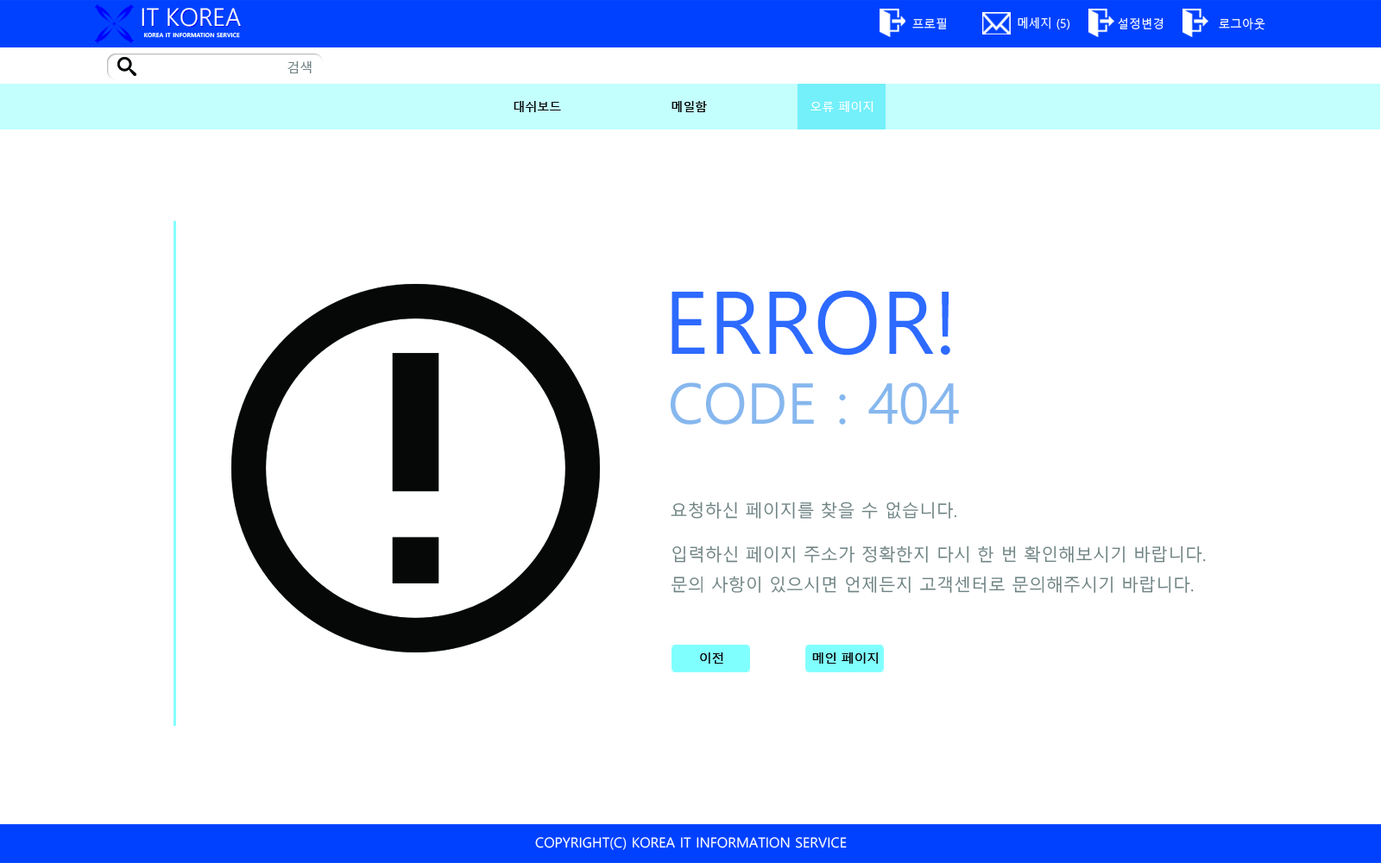
<style>
.page{position:relative;width:1381px;height:863px;background:#ffffff}
.page>*{position:absolute;margin:0}
.t1{font:12.1px "MalgunGothic";color:#ffffff}
.t2{font:12.9px "MalgunGothic";color:#6e8282}
.t3{font:12.1px "MalgunGothic";color:#060808}
.t4{font:86.3px "MalgunGothic";color:#2d6aff}
.t5{font:56.1px "MalgunGothic";color:#86b7ee}
.t6{font:17.3px "MalgunGothic";color:#708484}
.t7{font:12.5px "MalgunGothic";color:#060808}
.t8{font:13.8px "MalgunGothic";color:#ffffff}
</style>
<div class="page">
<p class="t1" style="left:912px;top:17px;width:35px;height:12px">프로필</p>
<p class="t1" style="left:1018px;top:16px;width:52px;height:14px">메세지 (5)</p>
<p class="t1" style="left:1118px;top:17px;width:46px;height:12px">설정변경</p>
<p class="t1" style="left:1219px;top:17px;width:47px;height:13px">로그아웃</p>
<p class="t2" style="left:287px;top:61px;width:25px;height:12px">검색</p>
<p class="t3" style="left:514px;top:101px;width:47px;height:11px">대쉬보드</p>
<p class="t3" style="left:672px;top:101px;width:35px;height:11px">메일함</p>
<p class="t1" style="left:811px;top:101px;width:63px;height:11px">오류 페이지</p>
<p class="t4" style="left:672px;top:290px;width:278px;height:66px">ERROR!</p>
<p class="t5" style="left:671px;top:382px;width:288px;height:43px">CODE : 404</p>
<p class="t6" style="left:671px;top:502px;width:286px;height:17px">요청하신 페이지를 찾을 수 없습니다.</p>
<p class="t6" style="left:672px;top:546px;width:534px;height:47px">입력하신 페이지 주소가 정확한지 다시 한 번 확인해보시기 바랍니다.<br>문의 사항이 있으시면 언제든지 고객센터로 문의해주시기 바랍니다.</p>
<p class="t7" style="left:700px;top:653px;width:23px;height:11px">이전</p>
<p class="t7" style="left:812px;top:653px;width:66px;height:11px">메인 페이지</p>
<p class="t8" style="left:535px;top:837px;width:312px;height:13px">COPYRIGHT(C) KOREA IT INFORMATION SERVICE</p>
</div>
